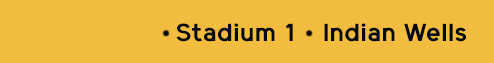
<style>
.page{position:relative;width:494px;height:63px;background:#f2bc3e}
.page>*{position:absolute;margin:0}
.t1{font:24.5px "ElliotSans-Medium";letter-spacing:0.025em;color:#050a11;font-weight:bold}
</style>
<div class="page">
<p class="t1" style="left:176px;top:23px;width:117px;height:19px">Stadium 1</p>
<p class="t1" style="left:324px;top:23px;width:142px;height:19px">Indian Wells</p>
</div>
